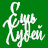
<style>
.page{position:relative;width:48px;height:48px;background:#00800f}
.page>*{position:absolute;margin:0}
.t1{font:32px "BarberryLetters";letter-spacing:-0.02em;color:#ffffff}
.t2{font:30px "BarberryLetters";letter-spacing:-0.02em;color:#ffffff}
</style>
<div class="page">
<p class="t1" style="left:8px;top:1px;width:29px;height:27px">Ешь</p>
<p class="t2" style="left:2px;top:18px;width:44px;height:30px">Худей</p>
</div>
